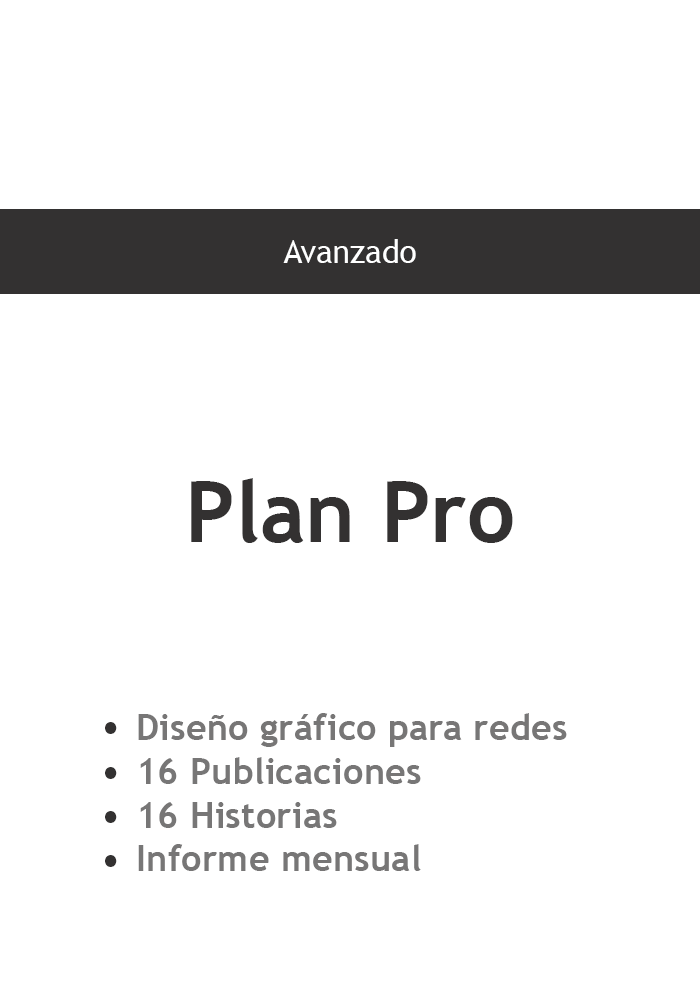
<style>
.page{position:relative;width:700px;height:1000px;background:#ffffff}
.page>*{position:absolute;margin:0}
.t1{font:31.8px "TrebuchetMS";color:#ffffff}
.t2{font:84.7px "TrebuchetMS-Bold";color:#333131}
.t3{font:36.4px "TrebuchetMS-Bold";color:#777676}
.t4{font:95.2px "MyriadPro-Regular";color:#333131}
</style>
<div class="page">
<p class="t1" style="left:283px;top:239px;width:133px;height:24px">Avanzado</p>
<p class="t2" style="left:191px;top:478px;width:322px;height:65px">Plan Pro</p>
<p class="t3" style="left:138px;top:713px;width:429px;height:158px">Diseño gráfico para redes<br>16 Publicaciones<br>16 Historias<br>Informe mensual</p>
<p class="t4" style="left:105px;top:722px;width:12px;height:12px">.</p>
<p class="t4" style="left:105px;top:767px;width:12px;height:12px">.</p>
<p class="t4" style="left:105px;top:811px;width:12px;height:12px">.</p>
<p class="t4" style="left:105px;top:855px;width:12px;height:12px">.</p>
</div>
